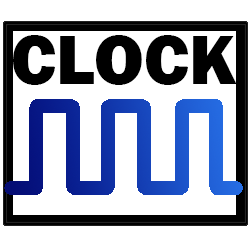
<style>
.page{position:relative;width:250px;height:250px;background:#ffffff}
.page>*{position:absolute;margin:0}
.t1{font:72px "FranklinGothic-Heavy";color:#000000}
</style>
<div class="page">
<p class="t1" style="left:13px;top:35px;width:224px;height:50px">CLOCK</p>
</div>
